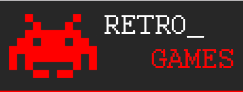
<style>
.page{position:relative;width:243px;height:92px;background:#272727}
.page>*{position:absolute;margin:0}
.t1{font:30px "Courier";color:#ffffff}
.t2{font:30px "Courier";color:#ff0000}
</style>
<div class="page">
<p class="t1" style="left:104px;top:15px;width:101px;height:23px">RETRO_</p>
<p class="t2" style="left:151px;top:49px;width:83px;height:19px">GAMES</p>
</div>
